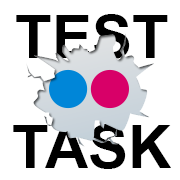
<style>
.page{position:relative;width:180px;height:180px;background:#ffffff}
.page>*{position:absolute;margin:0}
.t1{font:60px "Arial-BoldMT";color:#000000}
</style>
<div class="page">
<p class="t1" style="left:16px;top:14px;width:152px;height:45px">TEST</p>
<p class="t1" style="left:13px;top:124px;width:158px;height:45px">TASK</p>
</div>
